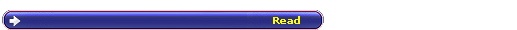
<style>
.page{position:relative;width:517px;height:30px;background:#ffffff}
.page>*{position:absolute;margin:0}
.t1{font:10px "Verdana-Bold";color:#fcff00}
</style>
<div class="page">
<p class="t1" style="left:273px;top:16px;width:27px;height:8px">Read</p>
</div>
